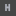
<style>
.page{position:relative;width:16px;height:16px;background:#464646}
.page>*{position:absolute;margin:0}
.t1{font:10px "Poppins-ExtraBold";letter-spacing:0.05em;color:#acaeb8;scale:0.75 1}
</style>
<div class="page">
<p class="t1" style="left:5px;top:3px;width:6px;height:9px">H</p>
</div>
